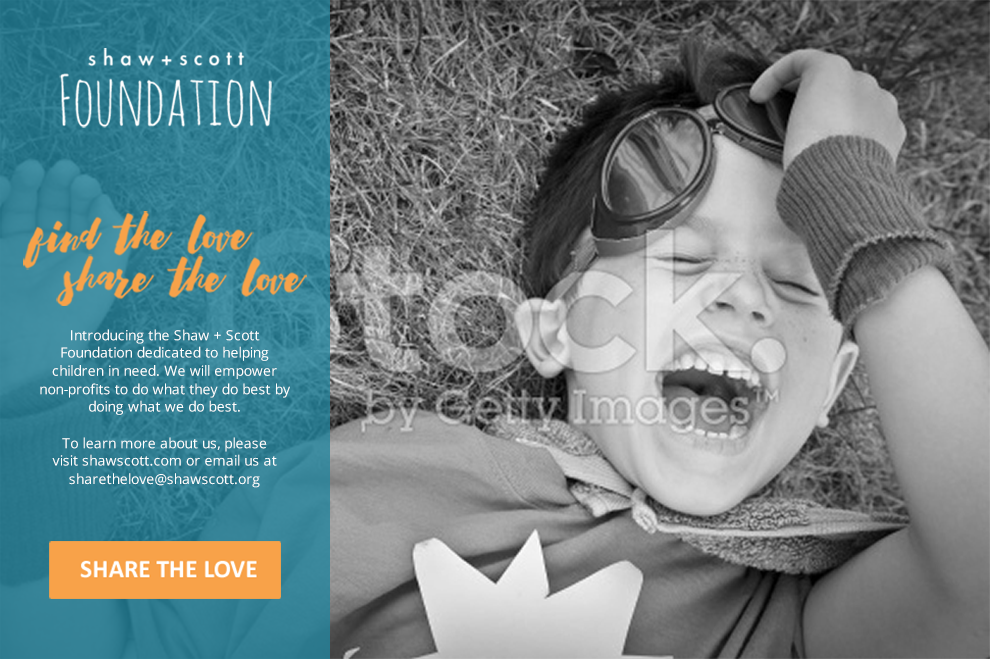
<style>
.page{position:relative;width:990px;height:659px}
.page>*{position:absolute;margin:0}
.t1{font:14px/18px "OpenSans";color:#ffffff}
</style>
<div class="page">
<p class="t1" style="left:40px;top:329px;width:250px;height:159px;text-align:center">Introducing the Shaw + Scott Foundation dedicated to helping children in need. We will empower non-profits to do what they do best by doing what we do best. <br><br>To learn more about us, please <br>visit shawscott.com or email us at sharethelove@shawscott.org</p>
</div>
